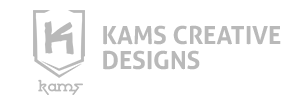
<style>
.page{position:relative;width:300px;height:100px;background:#ffffff}
.page>*{position:absolute;margin:0}
.t1{font:25px/25px "Aller-Bold";color:#b9b9b9}
</style>
<div class="page">
<p class="t1" style="left:103px;top:25px;width:178px;height:45px">KAMS CREATIVE<br>DESIGNS</p>
</div>
